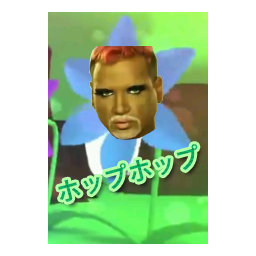
<style>
.page{position:relative;width:256px;height:256px;background:#ffffff}
.page>*{position:absolute;margin:0}
.t1{font:24px "AdobeHeitiStd-Regular";color:#0aa861;font-weight:bold}
</style>
<div class="page">
<p class="t1" style="left:58px;top:144px;width:140px;height:58px;rotate:-15deg">ホップホップ</p>
</div>
